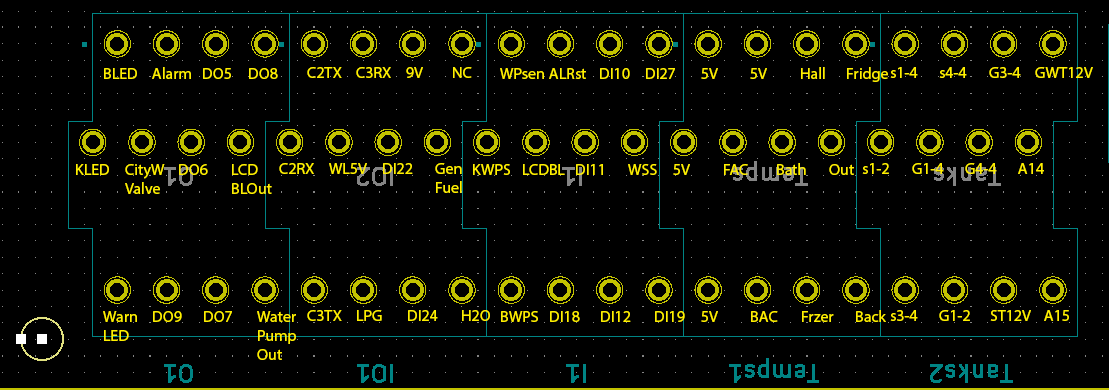
<style>
.page{position:relative;width:1109px;height:390px;background:#000000}
.page>*{position:absolute;margin:0}
.t1{font:12px "MyriadPro-Regular";color:#fff000}
</style>
<div class="page">
<p class="t1" style="left:104px;top:68px;width:33px;height:11px">BLED</p>
<p class="t1" style="left:152px;top:67px;width:39px;height:12px">Alarm</p>
<p class="t1" style="left:203px;top:68px;width:28px;height:11px">DO5</p>
<p class="t1" style="left:249px;top:68px;width:29px;height:11px">DO8</p>
<p class="t1" style="left:307px;top:67px;width:35px;height:11px">C2TX</p>
<p class="t1" style="left:356px;top:67px;width:35px;height:11px">C3RX</p>
<p class="t1" style="left:406px;top:67px;width:17px;height:11px">9V</p>
<p class="t1" style="left:453px;top:67px;width:19px;height:11px">NC</p>
<p class="t1" style="left:500px;top:68px;width:44px;height:11px">WPsen</p>
<p class="t1" style="left:549px;top:68px;width:37px;height:11px">ALRst</p>
<p class="t1" style="left:600px;top:68px;width:30px;height:11px">DI10</p>
<p class="t1" style="left:646px;top:68px;width:29px;height:11px">DI27</p>
<p class="t1" style="left:701px;top:68px;width:17px;height:11px">5V</p>
<p class="t1" style="left:750px;top:68px;width:17px;height:11px">5V</p>
<p class="t1" style="left:801px;top:67px;width:24px;height:12px">Hall</p>
<p class="t1" style="left:847px;top:67px;width:41px;height:15px">Fridge</p>
<p class="t1" style="left:890px;top:67px;width:28px;height:11px">s1-4</p>
<p class="t1" style="left:939px;top:67px;width:28px;height:11px">s4-4</p>
<p class="t1" style="left:989px;top:67px;width:32px;height:11px">G3-4</p>
<p class="t1" style="left:1035px;top:67px;width:58px;height:11px">GWT12V</p>
<p class="t1" style="left:76px;top:164px;width:33px;height:11px">KLED</p>
<p class="t1" style="left:125px;top:164px;width:40px;height:30px">CityW<br>Valve</p>
<p class="t1" style="left:179px;top:164px;width:29px;height:11px">DO6</p>
<p class="t1" style="left:232px;top:164px;width:40px;height:30px">LCD<br>BLOut</p>
<p class="t1" style="left:279px;top:163px;width:35px;height:11px">C2RX</p>
<p class="t1" style="left:329px;top:163px;width:38px;height:11px">WL5V</p>
<p class="t1" style="left:383px;top:163px;width:30px;height:11px">DI22</p>
<p class="t1" style="left:435px;top:163px;width:27px;height:30px">Gen<br>Fuel</p>
<p class="t1" style="left:473px;top:164px;width:37px;height:11px">KWPS</p>
<p class="t1" style="left:523px;top:164px;width:42px;height:11px">LCDBL</p>
<p class="t1" style="left:576px;top:164px;width:27px;height:11px">DI11</p>
<p class="t1" style="left:628px;top:164px;width:29px;height:11px">WSS</p>
<p class="t1" style="left:673px;top:164px;width:17px;height:11px">5V</p>
<p class="t1" style="left:724px;top:164px;width:24px;height:11px">FAC</p>
<p class="t1" style="left:777px;top:163px;width:29px;height:12px">Bath</p>
<p class="t1" style="left:829px;top:164px;width:25px;height:11px">Out</p>
<p class="t1" style="left:862px;top:163px;width:27px;height:11px">s1-2</p>
<p class="t1" style="left:912px;top:163px;width:32px;height:11px">G1-4</p>
<p class="t1" style="left:965px;top:163px;width:32px;height:11px">G4-4</p>
<p class="t1" style="left:1018px;top:163px;width:26px;height:11px">A14</p>
<p class="t1" style="left:103px;top:311px;width:34px;height:30px">Warn<br>LED</p>
<p class="t1" style="left:153px;top:311px;width:29px;height:11px">DO9</p>
<p class="t1" style="left:204px;top:311px;width:28px;height:11px">DO7</p>
<p class="t1" style="left:257px;top:311px;width:39px;height:49px">Water<br>Pump<br>Out</p>
<p class="t1" style="left:307px;top:310px;width:35px;height:11px">C3TX</p>
<p class="t1" style="left:357px;top:310px;width:25px;height:11px">LPG</p>
<p class="t1" style="left:408px;top:310px;width:30px;height:11px">DI24</p>
<p class="t1" style="left:462px;top:310px;width:28px;height:11px">H2O</p>
<p class="t1" style="left:501px;top:311px;width:37px;height:11px">BWPS</p>
<p class="t1" style="left:550px;top:311px;width:30px;height:11px">DI18</p>
<p class="t1" style="left:601px;top:311px;width:30px;height:11px">DI12</p>
<p class="t1" style="left:655px;top:311px;width:30px;height:11px">DI19</p>
<p class="t1" style="left:701px;top:311px;width:17px;height:11px">5V</p>
<p class="t1" style="left:751px;top:311px;width:27px;height:11px">BAC</p>
<p class="t1" style="left:802px;top:311px;width:32px;height:11px">Frzer</p>
<p class="t1" style="left:856px;top:310px;width:30px;height:12px">Back</p>
<p class="t1" style="left:890px;top:310px;width:28px;height:11px">s3-4</p>
<p class="t1" style="left:939px;top:310px;width:31px;height:11px">G1-2</p>
<p class="t1" style="left:990px;top:310px;width:41px;height:11px">ST12V</p>
<p class="t1" style="left:1044px;top:310px;width:25px;height:11px">A15</p>
</div>
